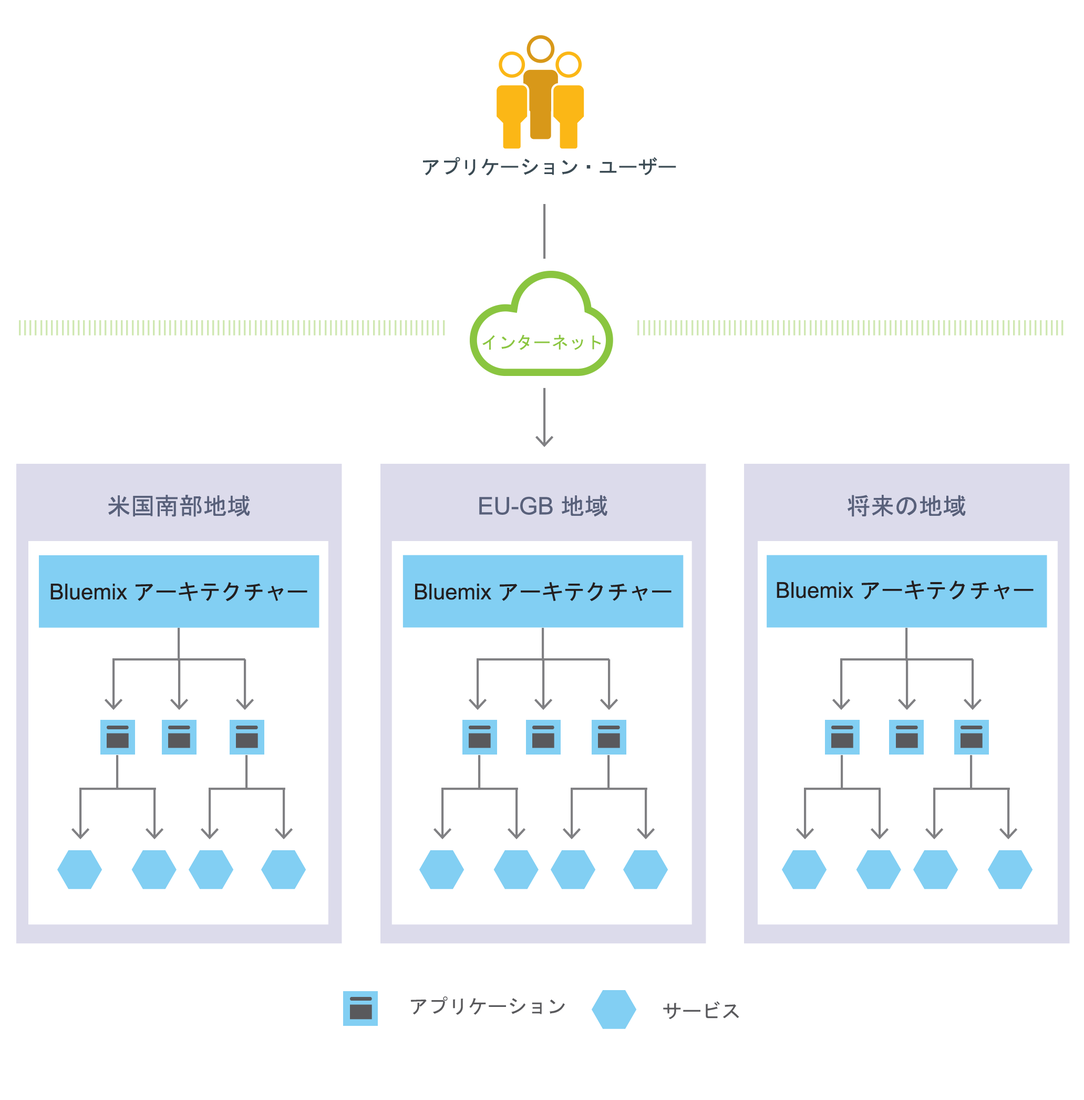
<style>
.page{position:relative;width:1084px;height:1100px;background:#ffffff}
.page>*{position:absolute;margin:0}
.t1{font:19.7px "MS-Gothic";color:#3b4b54}
.t2{font:17.5px "MS-Gothic";color:#8ac540}
.t3{font:24.1px "MS-Gothic";color:#58607a}
.t4{font:24.1px "ArialMT";color:#58607a}
.t5{font:21.9px "MS-Gothic";color:#231f20}
.t6{font:21.9px "ArialMT";color:#231f20}
.t7{font:19.7px "MS-Gothic";color:#59595c}
</style>
<div class="page">
<p class="t1" style="left:423px;top:157px;width:253px;height:19px">アプリケーション・ユーザー</p>
<p class="t2" style="left:483px;top:334px;width:118px;height:16px">インターネット</p>
<p class="t3" style="left:108px;top:495px;width:142px;height:22px">米国南部地域</p>
<p class="t4" style="left:479px;top:495px;width:129px;height:22px">EU-GB <span class="t3">地域</span></p>
<p class="t3" style="left:848px;top:495px;width:118px;height:22px">将来の地域</p>
<p class="t5" style="left:50px;top:582px;width:257px;height:19px"><span class="t6">Bluemix </span>アーキテクチャー</p>
<p class="t5" style="left:415px;top:582px;width:257px;height:19px"><span class="t6">Bluemix </span>アーキテクチャー</p>
<p class="t5" style="left:777px;top:580px;width:257px;height:20px"><span class="t6">Bluemix </span>アーキテクチャー</p>
<p class="t7" style="left:411px;top:996px;width:154px;height:18px">アプリケーション</p>
<p class="t7" style="left:663px;top:1001px;width:77px;height:18px">サービス</p>
</div>
